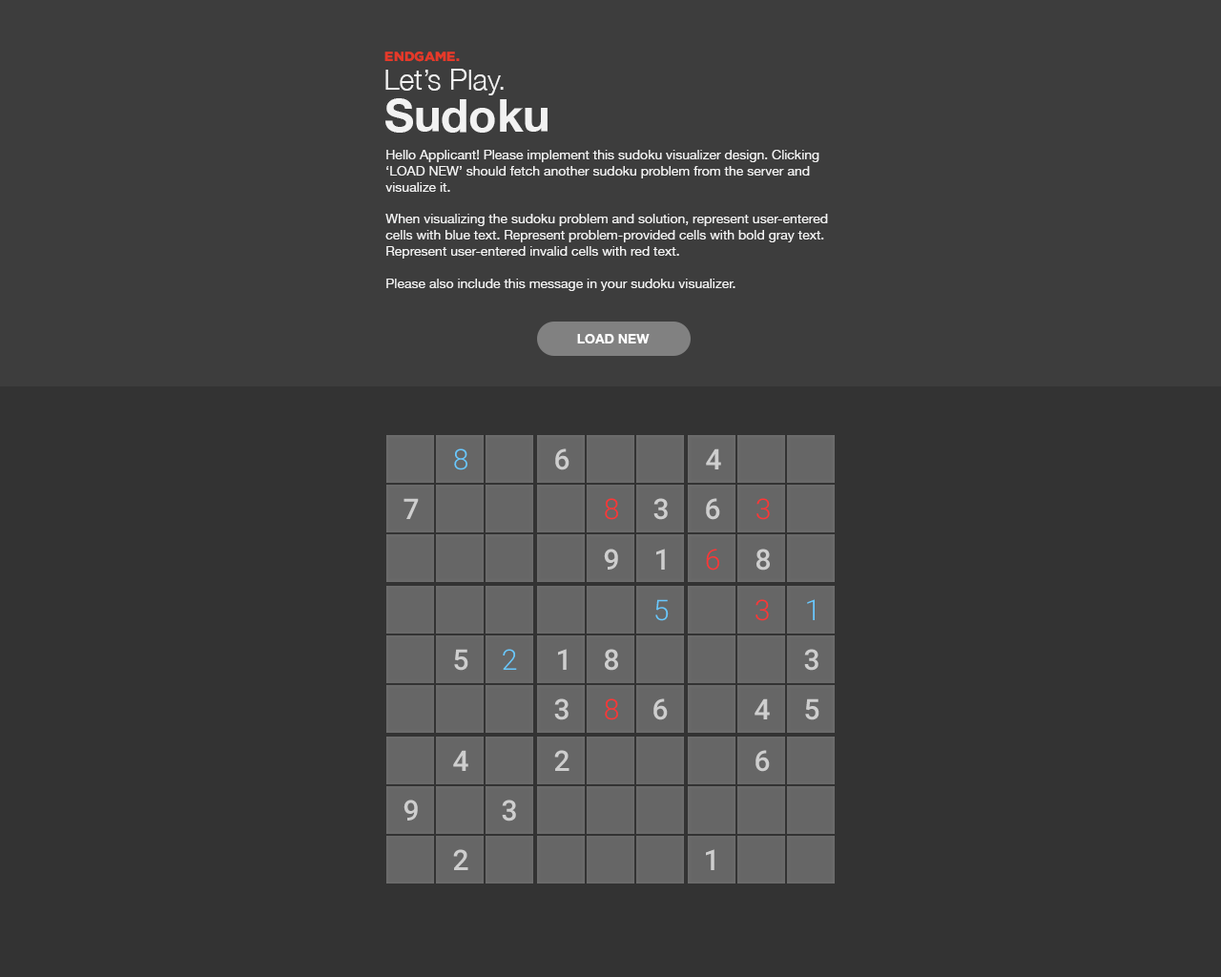
<style>
.page{position:relative;width:1221px;height:977px;background:#333333}
.page>*{position:absolute;margin:0}
.t1{font:13.4px "Gotham-Black";color:#e63929;text-transform:uppercase}
.t2{font:28.6px "HelveticaNeue-Light";color:#f2f2f2}
.t3{font:45.8px "HelveticaNeue-Bold";color:#f2f2f2}
.t4{font:13.4px "HelveticaNeue";color:#f2f2f2}
.t5{font:13.4px "HelveticaNeue-Bold";color:#ffffff;text-transform:uppercase}
.t6{font:28.6px "Roboto-Light";color:#69c8ff}
.t7{font:28.6px "Roboto-Medium";color:#cecece}
.t8{font:28.6px "Roboto-Light";color:#ff3636}
</style>
<div class="page">
<p class="t1" style="left:384px;top:52px;width:76px;height:10px">Endgame.</p>
<p class="t2" style="left:385px;top:69px;width:119px;height:26px">Let’s Play.</p>
<p class="t3" style="left:385px;top:98px;width:162px;height:35px">Sudoku</p>
<p class="t4" style="left:385px;top:150px;width:443px;height:141px">Hello Applicant! Please implement this sudoku visualizer design. Clicking ‘LOAD NEW’ should fetch another sudoku problem from the server and visualize it.<br><br>When visualizing the sudoku problem and solution, represent user-entered cells with blue text. Represent problem-provided cells with bold gray text. Represent user-entered invalid cells with red text.<br><br>Please also include this message in your sudoku visualizer.</p>
<p class="t5" style="left:577px;top:334px;width:73px;height:9px">Load New</p>
<p class="t6" style="left:454px;top:448px;width:13px;height:22px">8</p>
<p class="t7" style="left:555px;top:448px;width:14px;height:22px">6</p>
<p class="t7" style="left:706px;top:448px;width:15px;height:21px">4</p>
<p class="t7" style="left:403px;top:498px;width:16px;height:21px">7</p>
<p class="t8" style="left:605px;top:498px;width:13px;height:22px">8</p>
<p class="t7" style="left:653px;top:498px;width:15px;height:22px">3</p>
<p class="t7" style="left:706px;top:498px;width:14px;height:22px">6</p>
<p class="t8" style="left:756px;top:498px;width:14px;height:22px">3</p>
<p class="t7" style="left:604px;top:548px;width:14px;height:21px">9</p>
<p class="t7" style="left:656px;top:548px;width:9px;height:21px">1</p>
<p class="t8" style="left:706px;top:548px;width:13px;height:22px">6</p>
<p class="t7" style="left:756px;top:548px;width:14px;height:22px">8</p>
<p class="t6" style="left:655px;top:599px;width:14px;height:22px">5</p>
<p class="t8" style="left:755px;top:599px;width:14px;height:22px">3</p>
<p class="t6" style="left:807px;top:599px;width:8px;height:21px">1</p>
<p class="t7" style="left:454px;top:649px;width:14px;height:22px">5</p>
<p class="t6" style="left:503px;top:649px;width:14px;height:21px">2</p>
<p class="t7" style="left:558px;top:649px;width:9px;height:21px">1</p>
<p class="t7" style="left:605px;top:649px;width:13px;height:22px">8</p>
<p class="t7" style="left:804px;top:649px;width:14px;height:22px">3</p>
<p class="t7" style="left:554px;top:698px;width:14px;height:22px">3</p>
<p class="t8" style="left:605px;top:698px;width:13px;height:22px">8</p>
<p class="t7" style="left:653px;top:698px;width:15px;height:22px">6</p>
<p class="t7" style="left:754px;top:698px;width:16px;height:21px">4</p>
<p class="t7" style="left:805px;top:698px;width:14px;height:22px">5</p>
<p class="t7" style="left:453px;top:750px;width:15px;height:21px">4</p>
<p class="t7" style="left:554px;top:750px;width:15px;height:21px">2</p>
<p class="t7" style="left:755px;top:750px;width:15px;height:22px">6</p>
<p class="t7" style="left:403px;top:799px;width:15px;height:21px">9</p>
<p class="t7" style="left:502px;top:799px;width:14px;height:22px">3</p>
<p class="t7" style="left:453px;top:849px;width:15px;height:21px">2</p>
<p class="t7" style="left:706px;top:849px;width:8px;height:21px">1</p>
</div>
